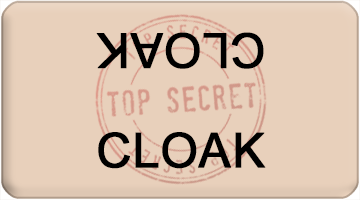
<style>
.page{position:relative;width:360px;height:200px;background:#e8d0bb}
.page>*{position:absolute;margin:0}
.t1{font:48px "ArialMT";color:#000000;font-weight:bold}
</style>
<div class="page">
<p class="t1" style="left:96px;top:32px;width:168px;height:37px;rotate:180deg">CLOAK</p>
<p class="t1" style="left:98px;top:132px;width:168px;height:37px">CLOAK</p>
</div>
